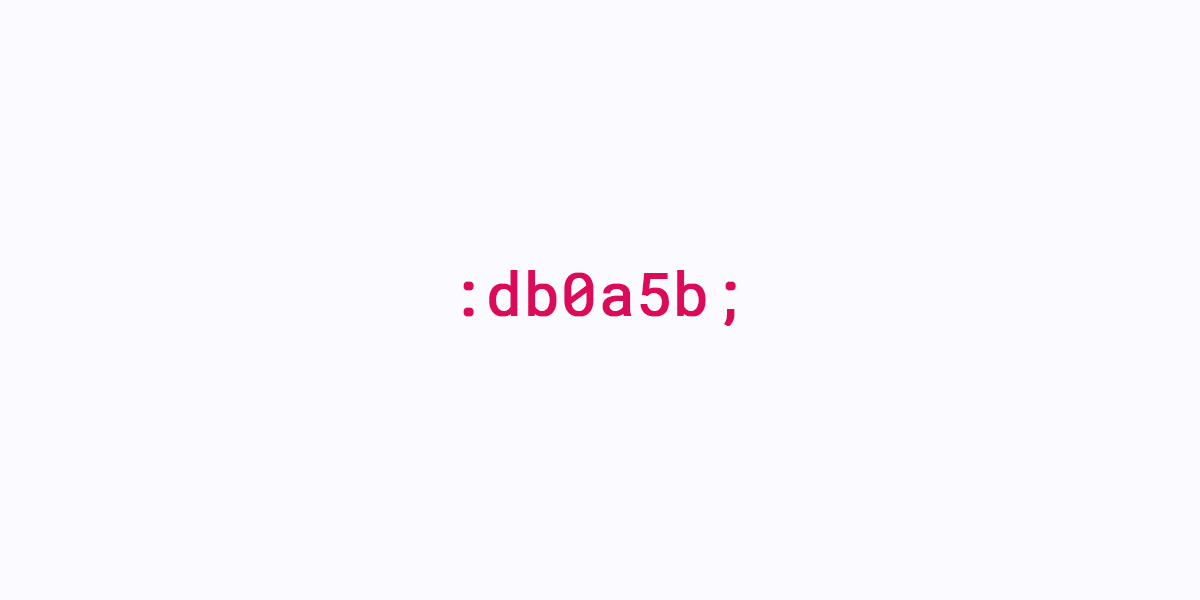
<style>
.page{position:relative;width:1200px;height:600px;background:#fafaff}
.page>*{position:absolute;margin:0}
.t1{font:60.1px "RobotoMono-Regular";color:#db0a5b;font-weight:bold}
</style>
<div class="page">
<p class="t1" style="left:463px;top:270px;width:273px;height:56px">:db0a5b;</p>
</div>
